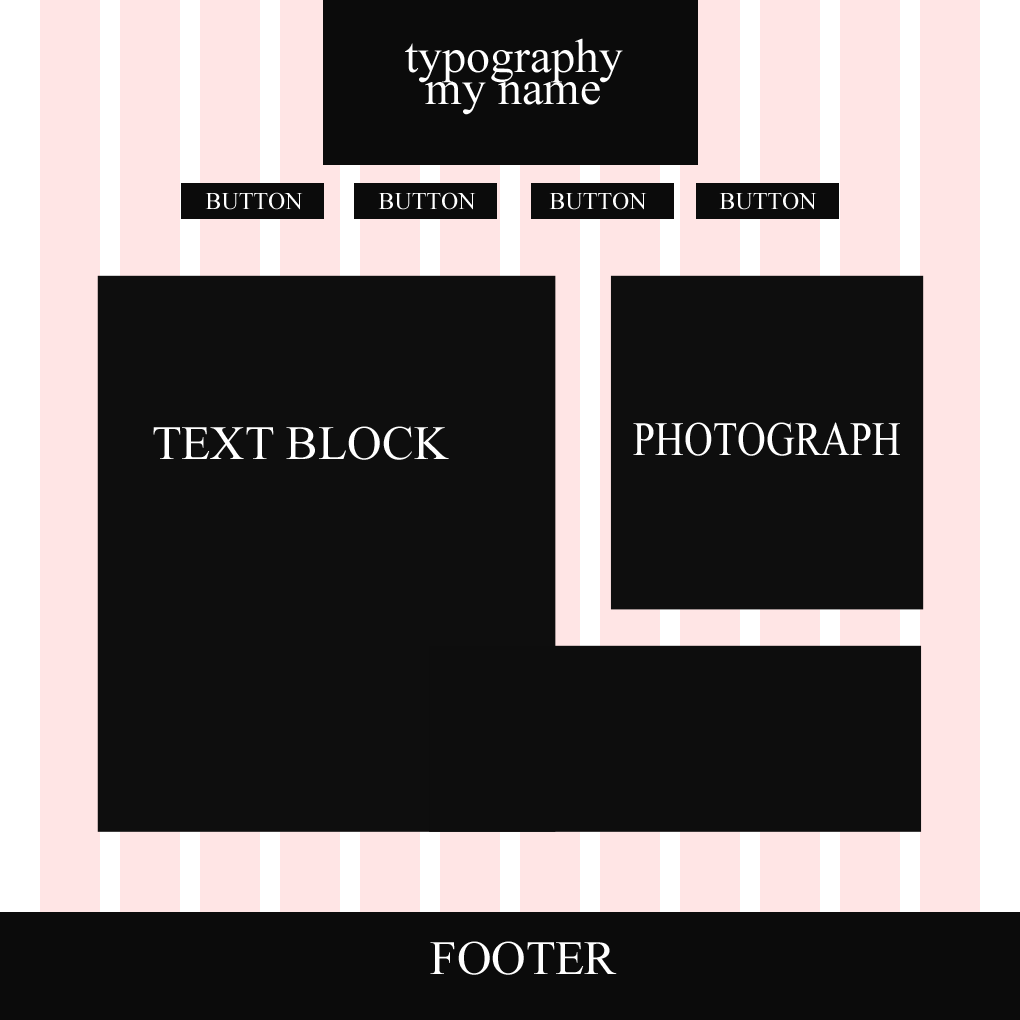
<style>
.page{position:relative;width:1020px;height:1020px;background:#0e0e0e}
.page>*{position:absolute;margin:0}
.t1{font:47.8px "TimesNewRomanPSMT";color:#ffffff}
.t2{font:23.9px "TimesNewRomanPSMT";color:#ffffff}
.t3{font:47.8px "TimesNewRomanPSMT";color:#ffffff;scale:0.83 1}
</style>
<div class="page">
<p class="t1" style="left:405px;top:38px;width:218px;height:45px">typography</p>
<p class="t1" style="left:425px;top:82px;width:175px;height:33px">my name</p>
<p class="t2" style="left:205px;top:192px;width:98px;height:18px">BUTTON</p>
<p class="t2" style="left:378px;top:192px;width:98px;height:18px">BUTTON</p>
<p class="t2" style="left:549px;top:192px;width:98px;height:18px">BUTTON</p>
<p class="t2" style="left:719px;top:192px;width:98px;height:18px">BUTTON</p>
<p class="t3" style="left:633px;top:422px;width:267px;height:34px">PHOTOGRAPH</p>
<p class="t1" style="left:153px;top:426px;width:296px;height:34px">TEXT BLOCK</p>
<p class="t1" style="left:430px;top:941px;width:187px;height:34px">FOOTER</p>
</div>
